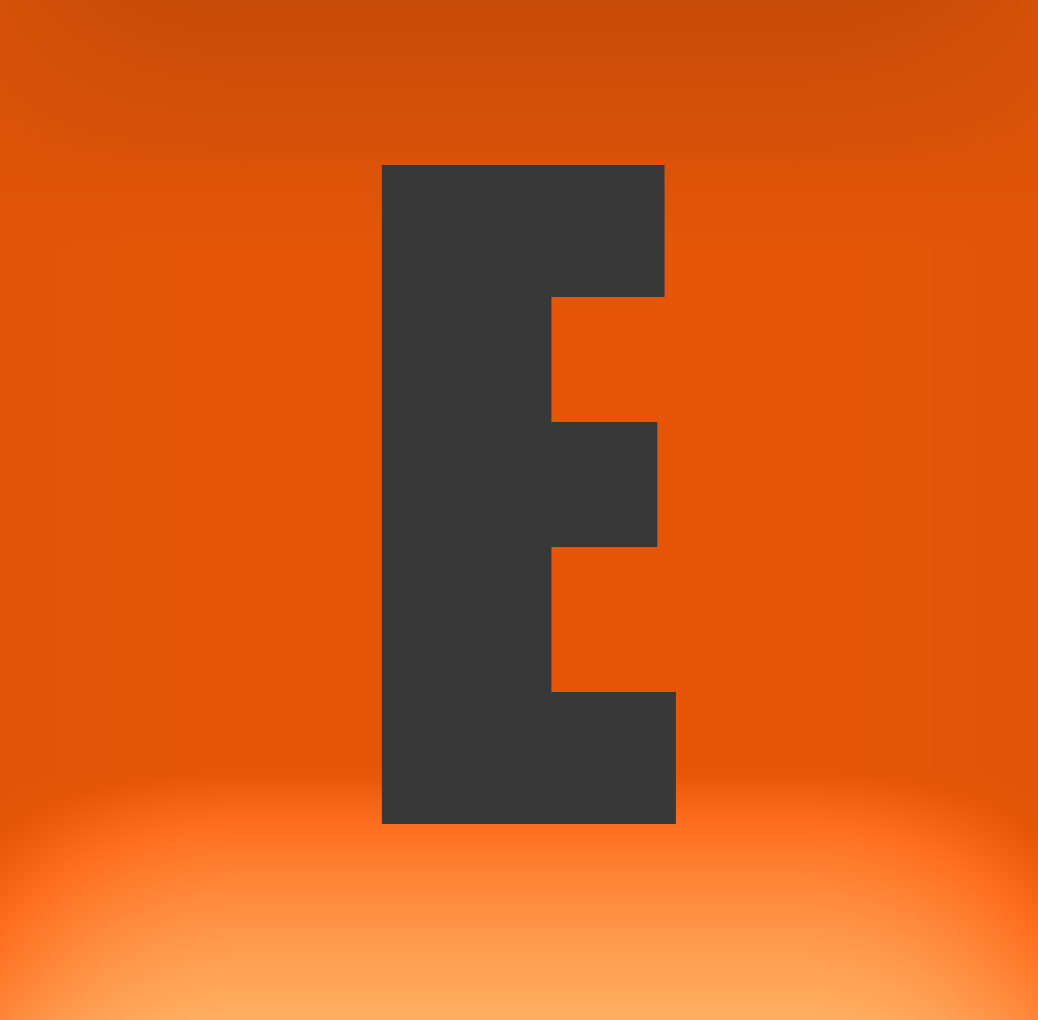
<style>
.page{position:relative;width:1038px;height:1020px;background:#e55608}
.page>*{position:absolute;margin:0}
.t1{font:833.3px "Impact";letter-spacing:-0.04em;color:#383838;text-transform:uppercase}
.t2{font:833.3px "MyriadPro-Regular";letter-spacing:-0.04em;color:#000000;text-transform:uppercase}
</style>
<div class="page">
<p class="t1" style="left:381px;top:165px;width:295px;height:659px"><span class="t2"><br><br><br><br><br><br><br><br><br><br><br><br><br><br><br><br><br><br><br><br><br><br><br><br><br><br><br><br><br><br><br></span>E</p>
</div>
